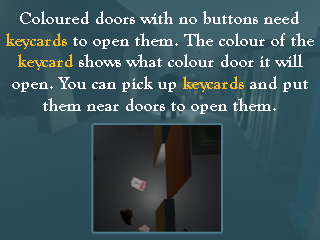
<style>
.page{position:relative;width:320px;height:240px}
.page>*{position:absolute;margin:0}
.t1{font:18px "GoudyOldStyleT-Bold";color:#ffffff}
.t2{font:18px "GoudyOldStyleT-Bold";color:#fbbb0e}
.t3{font:18px "GoudyOldStyleT-Bold";color:#faba0e}
</style>
<div class="page">
<p class="t1" style="left:6px;top:11px;width:308px;height:103px;text-align:center">Coloured doors with no buttons need<br><span class="t2">keycards</span> to open them. The colour of the<br><span class="t3">keycard</span> shows what colour door it will<br>open. You can pick up <span class="t2">keycards</span> and put<br>them near doors to open them.</p>
</div>
